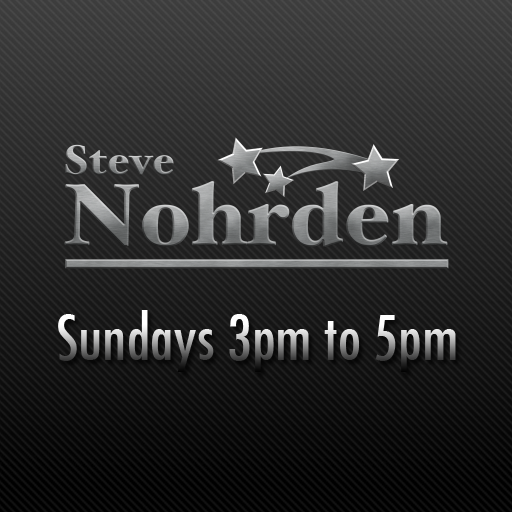
<style>
.page{position:relative;width:512px;height:512px}
.page>*{position:absolute;margin:0}
.t1{font:60px "Futura-CondensedMedium"}
</style>
<div class="page">
<p class="t1" style="left:58px;top:310px;width:398px;height:62px">Sundays 3pm to 5pm</p>
</div>
